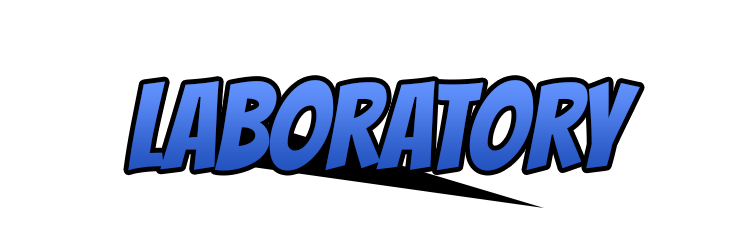
<style>
.page{position:relative;width:750px;height:250px;background:#ffffff}
.page>*{position:absolute;margin:0}
.t1{font:120px "Bangers-Regular"}
</style>
<div class="page">
<p class="t1" style="left:128px;top:80px;width:512px;height:91px">Laboratory</p>
</div>
